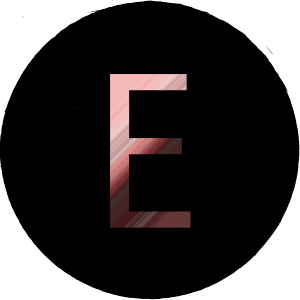
<style>
.page{position:relative;width:300px;height:300px;background:#000000}
.page>*{position:absolute;margin:0}
.t1{font:200px "MS-Gothic"}
</style>
<div class="page">
<p class="t1" style="left:110px;top:74px;width:81px;height:154px">E</p>
</div>
